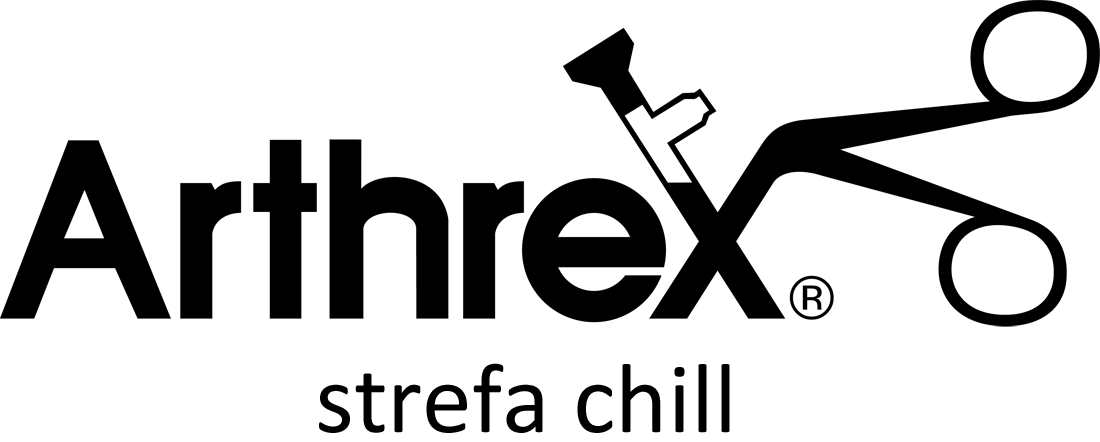
<style>
.page{position:relative;width:1100px;height:442px;background:#ffffff}
.page>*{position:absolute;margin:0}
.t1{font:100px "Calibri";color:#000000}
</style>
<div class="page">
<p class="t1" style="left:319px;top:363px;width:411px;height:70px">strefa chill</p>
</div>
